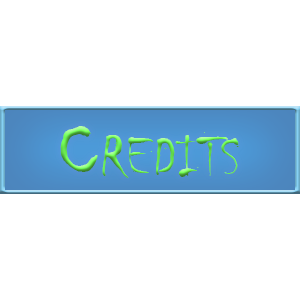
<style>
.page{position:relative;width:300px;height:300px;background:#ffffff}
.page>*{position:absolute;margin:0}
.t1{font:60px "Chiller-Regular"}
.t2{font:80px "Chiller-Regular"}
</style>
<div class="page">
<p class="t1" style="left:60px;top:126px;width:179px;height:52px"><span class="t2">C</span>REDITS</p>
</div>
